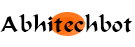
<style>
.page{position:relative;width:135px;height:47px;background:#ffffff}
.page>*{position:absolute;margin:0}
.t1{font:25px "Bodacious-Normal";color:#000000}
</style>
<div class="page">
<p class="t1" style="left:0px;top:14px;width:133px;height:19px">Abhitechbot</p>
</div>
